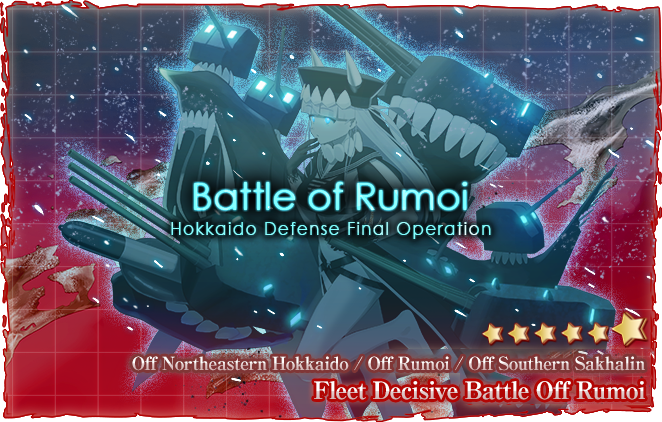
<style>
.page{position:relative;width:662px;height:422px}
.page>*{position:absolute;margin:0}
.t1{font:18px "RyuminPro-ExBold";letter-spacing:-0.04em}
.t2{font:24px "RyuminPro-ExBold";letter-spacing:-0.04em}
</style>
<div class="page">
<p class="t1" style="left:132px;top:356px;width:513px;height:15px">Off Northeastern Hokkaido / Off Rumoi / Off Southern Sakhalin</p>
<p class="t2" style="left:314px;top:381px;width:331px;height:19px">Fleet Decisive Battle Off Rumoi</p>
</div>
